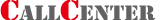
<style>
.page{position:relative;width:160px;height:20px;background:#ffffff}
.page>*{position:absolute;margin:0}
.t1{font:22px "Stencil";color:#626262;scale:1.1 1}
.t2{font:30px "Stencil";color:#e60012;scale:1.1 1}
</style>
<div class="page">
<p class="t1" style="left:0px;top:0px;width:155px;height:21px"><span class="t2">C</span>all<span class="t2">C</span>enter</p>
</div>
